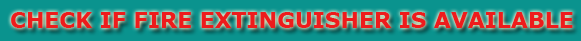
<style>
.page{position:relative;width:581px;height:41px;background:#0a938e}
.page>*{position:absolute;margin:0}
.t1{font:22px "Verdana-Bold";color:#ee1c1c}
</style>
<div class="page">
<p class="t1" style="left:11px;top:12px;width:562px;height:16px">CHECK IF FIRE EXTINGUISHER IS AVAILABLE</p>
</div>
